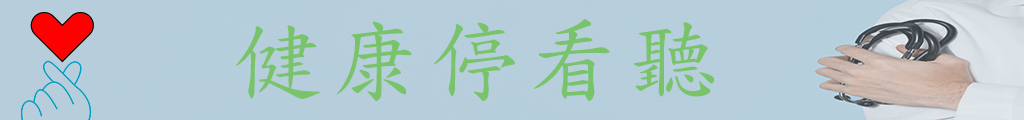
<style>
.page{position:relative;width:1024px;height:120px}
.page>*{position:absolute;margin:0}
.t1{font:90px "DFKaiShu-SB-Estd-BF";letter-spacing:0.1em;color:#79c46a}
</style>
<div class="page">
<p class="t1" style="left:236px;top:19px;width:478px;height:82px">健康停看聽</p>
</div>
